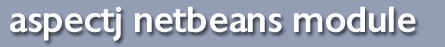
<style>
.page{position:relative;width:445px;height:47px;background:#939eb5}
.page>*{position:absolute;margin:0}
.t1{font:35px "Chantilly-Medium";color:#ffffff}
</style>
<div class="page">
<p class="t1" style="left:10px;top:6px;width:406px;height:35px">aspectj netbeans module</p>
</div>
